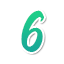
<style>
.page{position:relative;width:64px;height:64px;background:#ffffff}
.page>*{position:absolute;margin:0}
.t1{font:72px "MaroonedOnMarsBB";color:#1cba90}
</style>
<div class="page">
<p class="t1" style="left:21px;top:10px;width:23px;height:42px">6</p>
</div>
